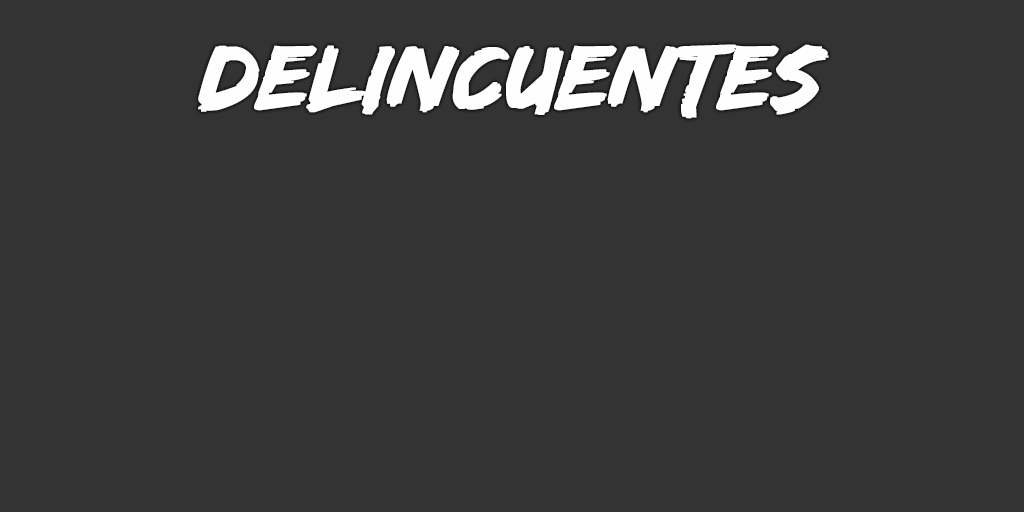
<style>
.page{position:relative;width:1024px;height:512px;background:#333333}
.page>*{position:absolute;margin:0}
.t1{font:94px "EdoSZ";color:#fefefe;font-weight:bold;font-style:italic;scale:1.04 1}
</style>
<div class="page">
<p class="t1" style="left:198px;top:44px;width:631px;height:75px">Delincuentes</p>
</div>
